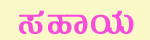
<style>
.page{position:relative;width:150px;height:40px;background:#fbf9c7}
.page>*{position:absolute;margin:0}
.t1{font:48px "Kuvempu_Eng_0005";color:#f74bd9}
</style>
<div class="page">
<p class="t1" style="left:19px;top:10px;width:115px;height:24px">¸ÀºÁAiÀÄ</p>
</div>
